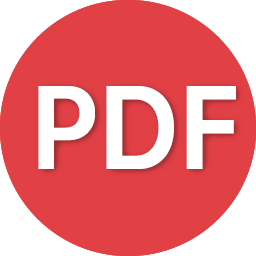
<style>
.page{position:relative;width:256px;height:256px;background:#e14045}
.page>*{position:absolute;margin:0}
.t1{font:100px "OPPOSans-H";color:#ffffff}
</style>
<div class="page">
<p class="t1" style="left:38px;top:86px;width:198px;height:83px">PDF</p>
</div>
